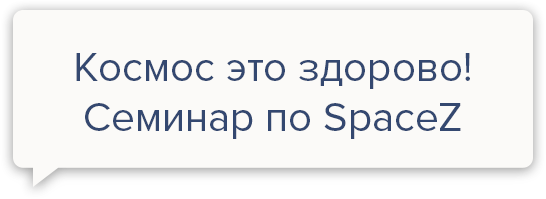
<style>
.page{position:relative;width:546px;height:199px;background:#fbfaf8}
.page>*{position:absolute;margin:0}
.t1{font:42px "ProximaNova-Regular";color:#344870}
</style>
<div class="page">
<p class="t1" style="left:76px;top:53px;width:394px;height:86px;text-align:center">Космос это здорово!<br>Семинар по SpaceZ</p>
</div>
